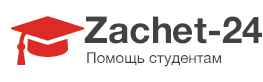
<style>
.page{position:relative;width:263px;height:82px;background:#ffffff}
.page>*{position:absolute;margin:0}
.t1{font:37px "HelveticaNeue-Bold";color:#424242}
.t2{font:15px "HelveticaNeue";color:#424242}
</style>
<div class="page">
<p class="t1" style="left:84px;top:16px;width:178px;height:28px">Zachet-24</p>
<p class="t2" style="left:87px;top:52px;width:134px;height:15px">Помощь студентам</p>
</div>
